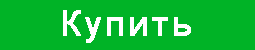
<style>
.page{position:relative;width:255px;height:50px;background:#00b326}
.page>*{position:absolute;margin:0}
.t1{font:35.3px "ArialMT";letter-spacing:0.09em;color:#ffffff;font-weight:bold}
</style>
<div class="page">
<p class="t1" style="left:63px;top:10px;width:128px;height:33px">Купить</p>
</div>
